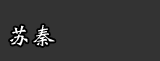
<style>
.page{position:relative;width:160px;height:61px;background:#333333}
.page>*{position:absolute;margin:0}
.t1{font:24px "STXinwei";color:#ffffff}
</style>
<div class="page">
<p class="t1" style="left:10px;top:25px;width:45px;height:21px">苏秦</p>
</div>
